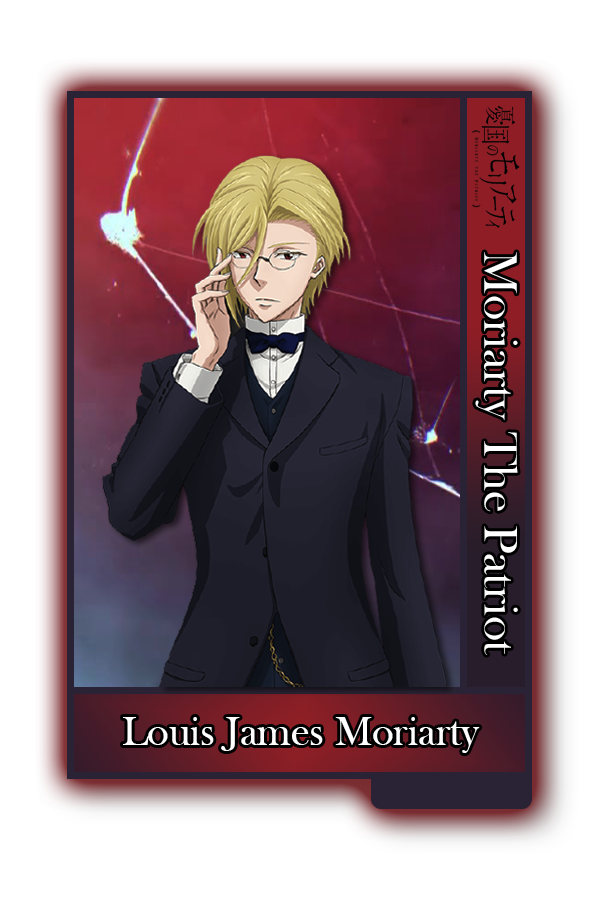
<style>
.page{position:relative;width:600px;height:900px;background:#ffffff}
.page>*{position:absolute;margin:0}
.t1{font:48.8px "BaskOldFace";color:#ffffff}
.t2{font:41.7px "BaskOldFace";color:#ffffff}
</style>
<div class="page">
<p class="t1" style="left:475px;top:252px;width:43px;height:403px;rotate:90deg">Moriarty The Patriot</p>
<p class="t2" style="left:123px;top:717px;width:357px;height:36px">Louis James Moriarty</p>
</div>
